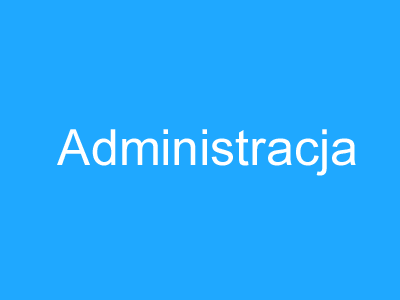
<style>
.page{position:relative;width:400px;height:300px;background:#1fa8ff}
.page>*{position:absolute;margin:0}
.t1{font:50px "ArialMT";color:#ffffff}
</style>
<div class="page">
<p class="t1" style="left:57px;top:129px;width:299px;height:47px">Administracja</p>
</div>
